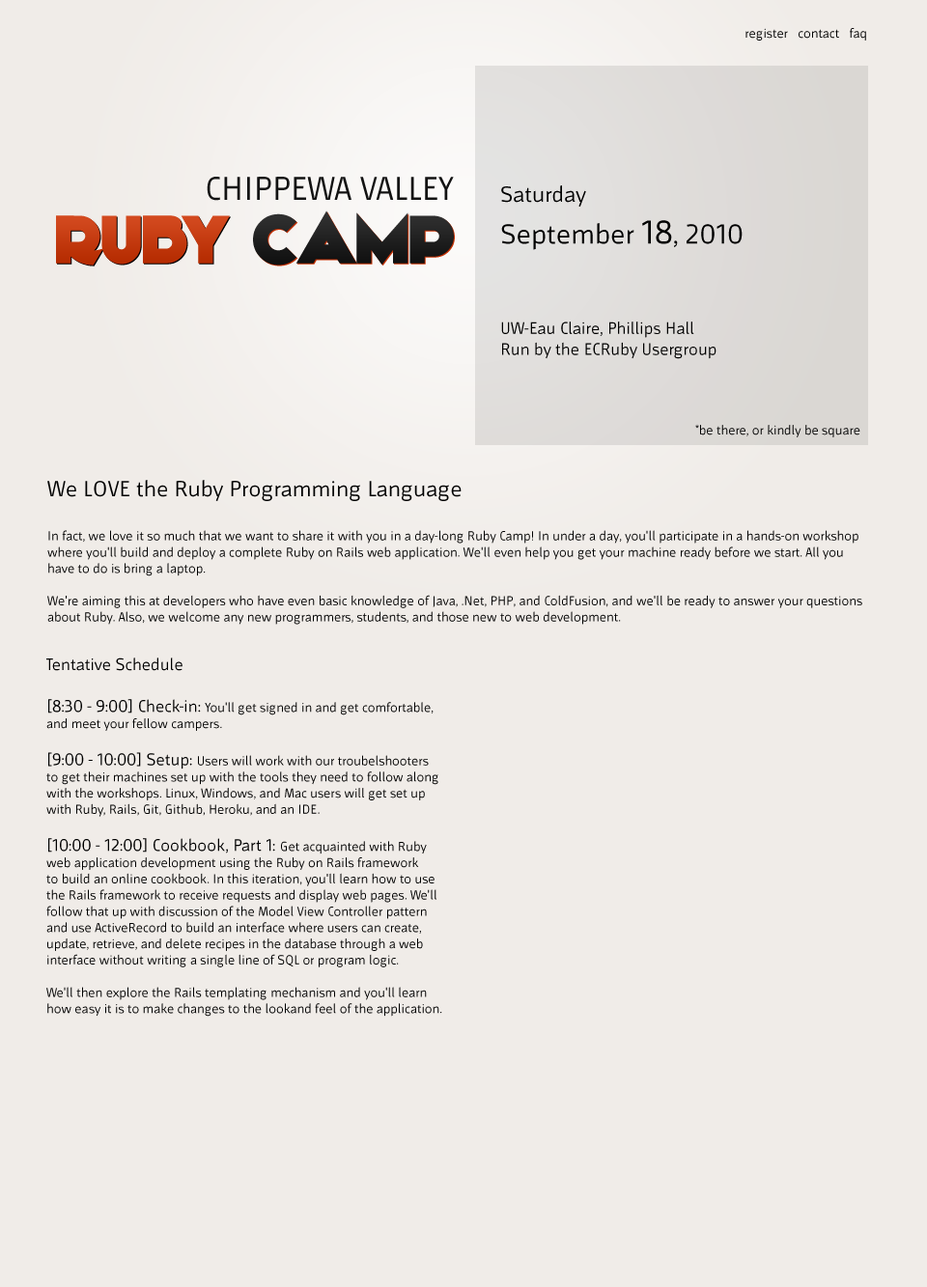
<style>
.page{position:relative;width:927px;height:1287px;background:#f0ece8}
.page>*{position:absolute;margin:0}
.t1{font:13.5px "MrJones-Book";color:#000000}
.t2{font:34.8px "MrJones-Book";color:#121212}
.t3{font:17.4px "MrJones-Book";color:#000000}
.t4{font:23.2px "MrJones-Book";color:#000000}
.t5{font:29px "MrJones-Book";color:#000000}
.t6{font:34.8px "MrJones-Book";color:#000000}
.t7{font:69.5px "KiloGram";color:#cf3100}
.t8{font:69.5px "KiloGram";color:#121212}
</style>
<div class="page">
<p class="t1" style="left:745px;top:28px;width:121px;height:13px">register   contact   faq</p>
<p class="t2" style="left:207px;top:177px;width:247px;height:24px">CHIPPEWA VALLEY</p>
<p class="t3" style="left:501px;top:185px;width:241px;height:174px"><span class="t4">Saturday<br></span><span class="t5">September </span><span class="t6">18</span><span class="t5">, 2010<br><br><br></span>UW-Eau Claire, Phillips Hall<br>Run by the ECRuby Usergroup</p>
<p class="t7" style="left:56px;top:210px;width:398px;height:55px">RUBY <span class="t8">CAMP</span></p>
<p class="t1" style="left:695px;top:424px;width:165px;height:13px">*be there, or kindly be square</p>
<p class="t1" style="left:47px;top:480px;width:815px;height:145px"><span class="t4">We LOVE the Ruby Programming Language<br><br></span>In fact, we love it so much that we want to share it with you in a day-long Ruby Camp! In under a day, you'll participate in a hands-on workshop<br>where you'll build and deploy a complete Ruby on Rails web application. We'll even help you get your machine ready before we start. All you<br>have to do is bring a laptop.<br><br>We're aiming this at developers who have even basic knowledge of Java, .Net, PHP, and ColdFusion, and we'll be ready to answer your questions<br>about Ruby. Also, we welcome any new programmers, students, and those new to web development.</p>
<p class="t1" style="left:46px;top:657px;width:396px;height:359px"><span class="t3">Tentative Schedule<br><br>[8:30 - 9:00] Check-in: </span>You'll get signed in and get comfortable,<br>and meet your fellow campers.<br><br><span class="t3">[9:00 - 10:00] Setup: </span>Users will work with our troubelshooters<br>to get their machines set up with the tools they need to follow along<br>with the workshops. Linux, Windows, and Mac users will get set up<br>with Ruby, Rails, Git, Github, Heroku, and an IDE.<br><br><span class="t3">[10:00 - 12:00] Cookbook, Part 1: </span>Get acquainted with Ruby<br>web application development using the Ruby on Rails framework<br>to build an online cookbook. In this iteration, you'll learn how to use<br>the Rails framework to receive requests and display web pages. We'll<br>follow that up with discussion of the Model View Controller pattern<br>and use ActiveRecord to build an interface where users can create,<br>update, retrieve, and delete recipes in the database through a web<br>interface without writing a single line of SQL or program logic.<br><br>We'll then explore the Rails templating mechanism and you'll learn<br>how easy it is to make changes to the lookand feel of the application.</p>
</div>
